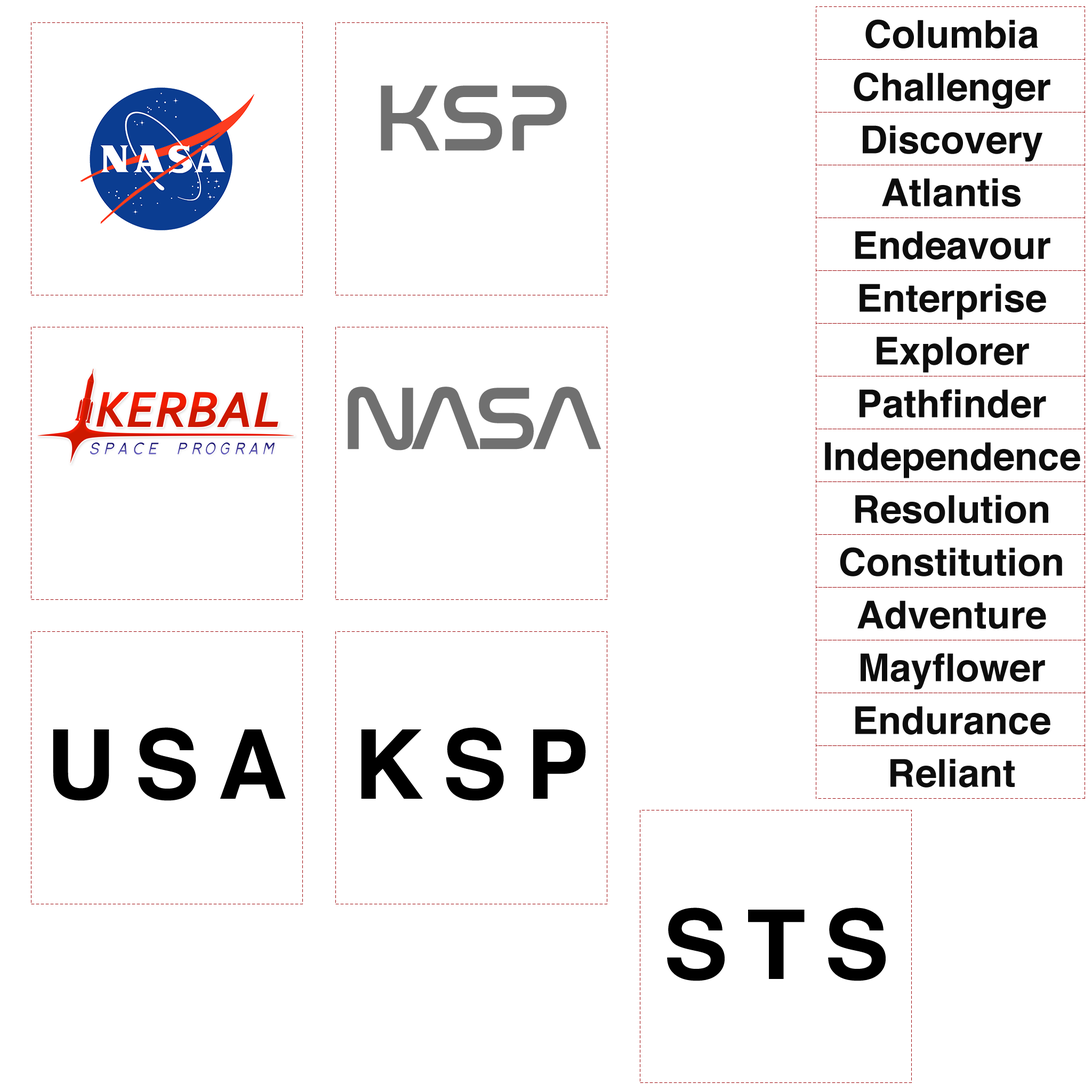
<style>
.page{position:relative;width:1092px;height:1092px;background:#ffffff}
.page>*{position:absolute;margin:0}
.t1{font:38.4px "Helvetica-Bold";color:#000000}
.t2{font:96px "NasalizationRg-Regular";letter-spacing:-0.02em;color:#707070}
.t3{font:90.6px "NasalizationRg-Regular";letter-spacing:-0.072em;color:#707070}
.t4{font:96px "Helvetica-Bold";letter-spacing:0.2em;color:#000000}
</style>
<div class="page">
<p class="t1" style="left:865px;top:19px;width:173px;height:30px;opacity:0.95">Columbia</p>
<p class="t1" style="left:854px;top:72px;width:196px;height:37px;opacity:0.95">Challenger</p>
<p class="t2" style="left:381px;top:85px;width:186px;height:66px">KSP</p>
<p class="t1" style="left:863px;top:125px;width:179px;height:37px;opacity:0.95">Discovery</p>
<p class="t1" style="left:882px;top:178px;width:139px;height:29px;opacity:0.95">Atlantis</p>
<p class="t1" style="left:855px;top:231px;width:195px;height:29px;opacity:0.95">Endeavour</p>
<p class="t1" style="left:860px;top:284px;width:186px;height:36px;opacity:0.95">Enterprise</p>
<p class="t1" style="left:877px;top:336px;width:152px;height:37px;opacity:0.95">Explorer</p>
<p class="t3" style="left:348px;top:387px;width:253px;height:64px">NASA</p>
<p class="t1" style="left:860px;top:389px;width:186px;height:29px;opacity:0.95">Pathfinder</p>
<p class="t1" style="left:825px;top:442px;width:255px;height:36px;opacity:0.95">Independence</p>
<p class="t1" style="left:855px;top:495px;width:193px;height:29px;opacity:0.95">Resolution</p>
<p class="t1" style="left:840px;top:547px;width:222px;height:29px;opacity:0.95">Constitution</p>
<p class="t1" style="left:857px;top:600px;width:189px;height:29px;opacity:0.95">Adventure</p>
<p class="t1" style="left:861px;top:653px;width:184px;height:36px;opacity:0.95">Mayflower</p>
<p class="t1" style="left:855px;top:706px;width:195px;height:29px;opacity:0.95">Endurance</p>
<p class="t4" style="left:53px;top:727px;width:233px;height:74px">USA</p>
<p class="t4" style="left:361px;top:727px;width:225px;height:74px">KSP</p>
<p class="t1" style="left:890px;top:759px;width:125px;height:29px;opacity:0.95">Reliant</p>
<p class="t4" style="left:667px;top:907px;width:219px;height:74px">STS</p>
</div>
